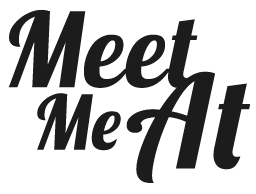
<style>
.page{position:relative;width:256px;height:194px;background:#ffffff}
.page>*{position:absolute;margin:0}
.t1{font:102.9px "Lobster";letter-spacing:0.02em;color:#1c1c1c}
.t2{font:128.7px "Lobster";letter-spacing:0.02em;color:#1c1c1c}
.t3{font:75.1px "Lobster";letter-spacing:0.02em;color:#1c1c1c}
</style>
<div class="page">
<p class="t1" style="left:8px;top:9px;width:190px;height:79px">Meet</p>
<p class="t2" style="left:126px;top:71px;width:125px;height:112px">At</p>
<p class="t3" style="left:37px;top:93px;width:84px;height:58px">Me</p>
</div>
